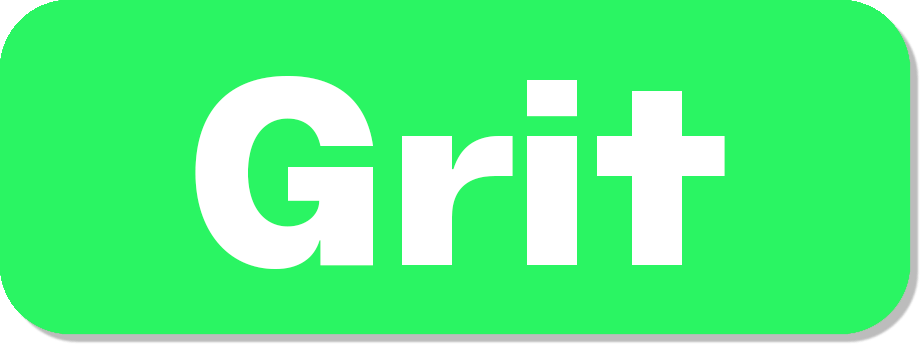
<style>
.page{position:relative;width:920px;height:344px;background:#2af563}
.page>*{position:absolute;margin:0}
.t1{font:250px "FONTSPRINGDEMO-TGHaidoGroteskBlackRegular";color:#ffffff}
</style>
<div class="page">
<p class="t1" style="left:195px;top:76px;width:530px;height:193px">Grit</p>
</div>
